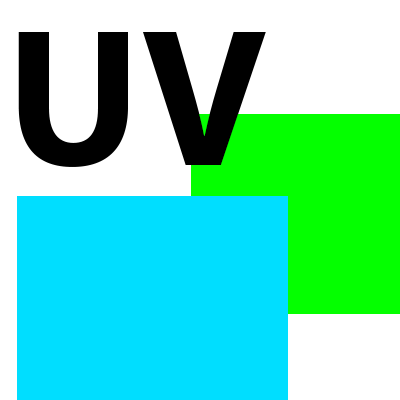
<style>
.page{position:relative;width:400px;height:400px;background:#ffffff}
.page>*{position:absolute;margin:0}
.t1{font:197.5px "MyriadPro-Bold";color:#000000}
</style>
<div class="page">
<p class="t1" style="left:18px;top:32px;width:248px;height:135px">UV</p>
</div>
